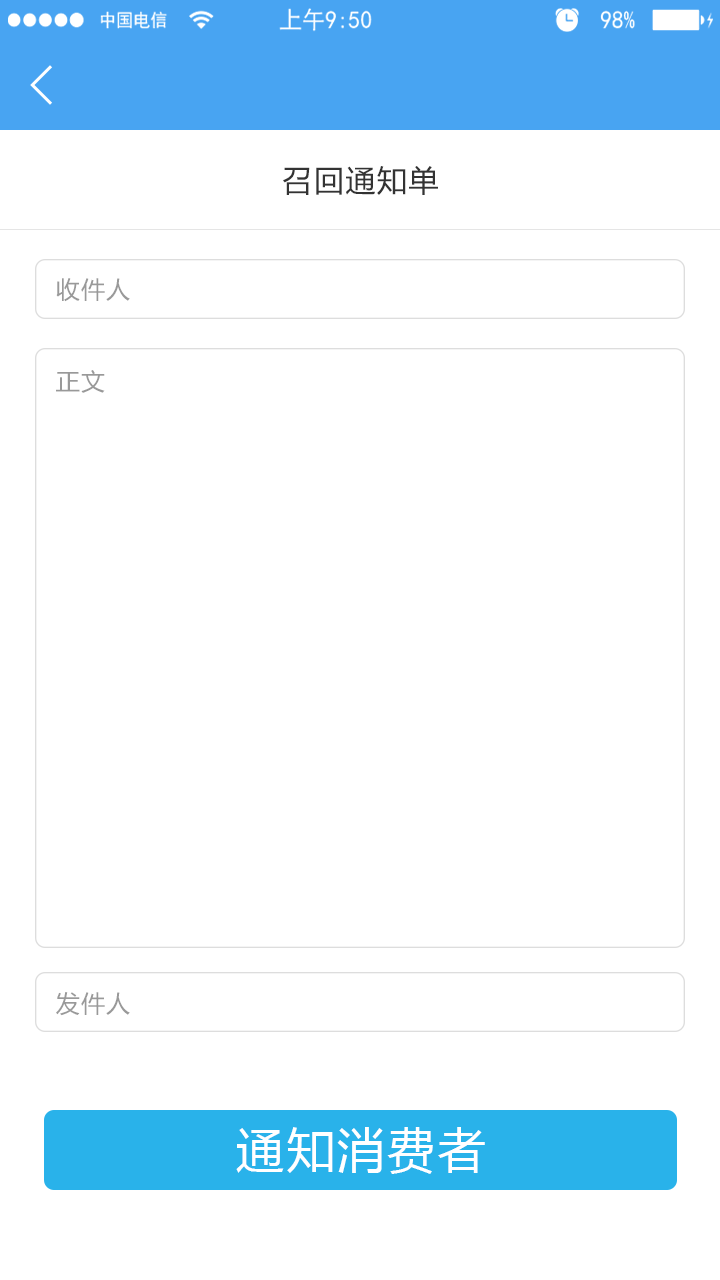
<style>
.page{position:relative;width:720px;height:1280px;background:#ffffff}
.page>*{position:absolute;margin:0}
.t1{font:30px "MicrosoftYaHei";letter-spacing:0.05em;color:#333333}
.t2{font:24px "MicrosoftYaHei";letter-spacing:0.05em;color:#999999}
.t3{font:48px "MicrosoftYaHei";letter-spacing:0.05em;color:#ffffff}
</style>
<div class="page">
<p class="t1" style="left:283px;top:166px;width:155px;height:29px">召回通知单</p>
<p class="t2" style="left:56px;top:278px;width:74px;height:24px">收件人</p>
<p class="t2" style="left:56px;top:370px;width:49px;height:23px">正文</p>
<p class="t2" style="left:56px;top:992px;width:74px;height:24px">发件人</p>
<p class="t3" style="left:236px;top:1127px;width:249px;height:47px">通知消费者</p>
</div>
